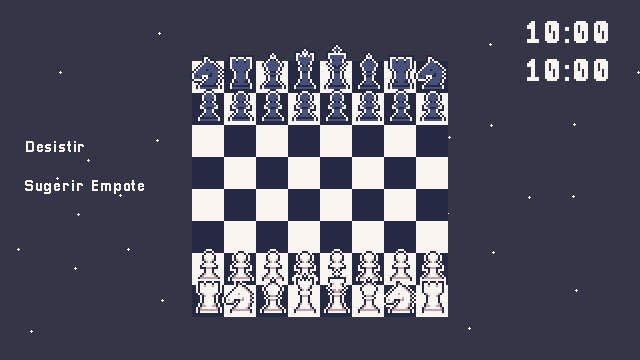
<style>
.page{position:relative;width:640px;height:360px;background:#343647}
.page>*{position:absolute;margin:0}
.t1{font:32px "Pixellari";letter-spacing:0.05em;color:#faf5f0}
.t2{font:16px "Pixellari";letter-spacing:0.05em;color:#faf5f0}
</style>
<div class="page">
<p class="t1" style="left:527px;top:21px;width:81px;height:60px">10:00<br>10:00</p>
<p class="t2" style="left:25px;top:141px;width:119px;height:53px">Desistir<br><br>Sugerir Empate</p>
</div>
